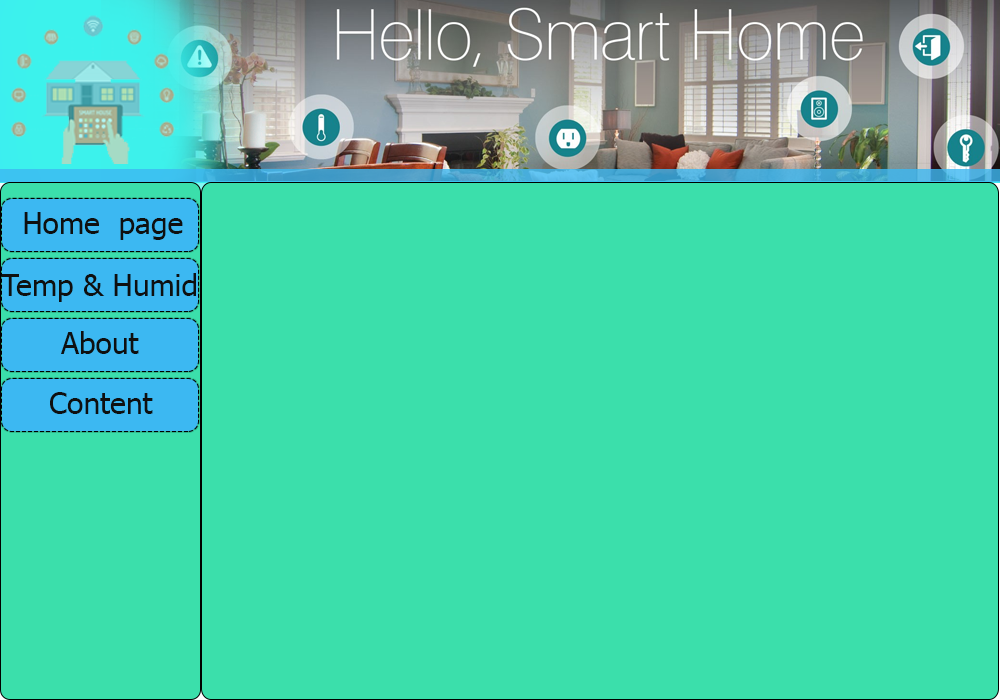
<style>
.page{position:relative;width:1000px;height:700px;background:#3bdfab}
.page>*{position:absolute;margin:0}
.t1{font:30px "Tahoma";color:#0f1010}
</style>
<div class="page">
<p class="t1" style="left:24px;top:212px;width:159px;height:28px">Home  page</p>
<p class="t1" style="left:1px;top:273px;width:195px;height:29px">Temp &amp; Humid</p>
<p class="t1" style="left:61px;top:331px;width:78px;height:23px">About</p>
<p class="t1" style="left:50px;top:392px;width:103px;height:22px">Content</p>
</div>
